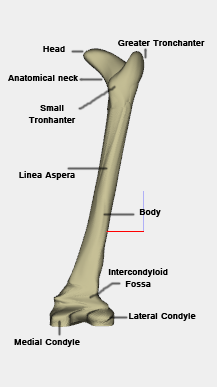
<style>
.page{position:relative;width:217px;height:387px;background:#efefef}
.page>*{position:absolute;margin:0}
.t1{font:10px "Raavi";color:#000000}
</style>
<div class="page">
<p class="t1" style="left:118px;top:40px;width:87px;height:6px">Greater Tronchanter</p>
<p class="t1" style="left:43px;top:46px;width:22px;height:6px">Head</p>
<p class="t1" style="left:8px;top:74px;width:70px;height:7px">Anatomical neck</p>
<p class="t1" style="left:28px;top:105px;width:48px;height:18px;text-align:center">Small<br>Tronhanter</p>
<p class="t1" style="left:19px;top:171px;width:56px;height:9px">Linea Aspera</p>
<p class="t1" style="left:139px;top:209px;width:22px;height:8px">Body</p>
<p class="t1" style="left:108px;top:268px;width:60px;height:19px;text-align:center">Intercondyloid<br>Fossa</p>
<p class="t1" style="left:129px;top:313px;width:67px;height:8px">Lateral Condyle</p>
<p class="t1" style="left:14px;top:338px;width:66px;height:9px">Medial Condyle</p>
</div>
